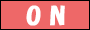
<style>
.page{position:relative;width:90px;height:30px;background:#ee6868}
.page>*{position:absolute;margin:0}
.t1{font:24px "HGPSoeiKakupoptai";color:#ffffff;font-weight:bold}
</style>
<div class="page">
<p class="t1" style="left:26px;top:5px;width:39px;height:21px">O N</p>
</div>
